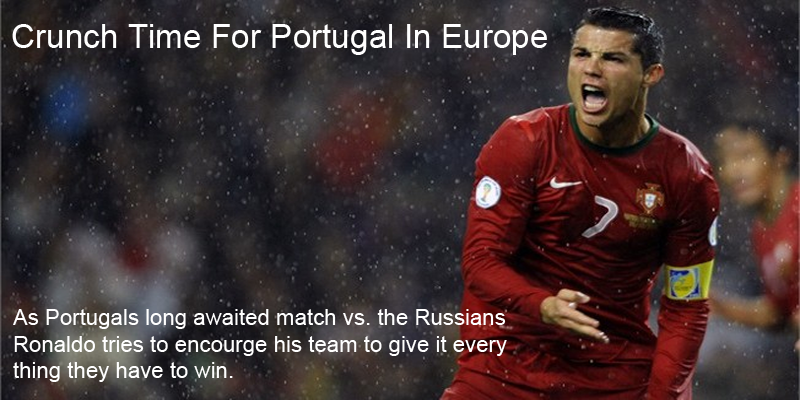
<style>
.page{position:relative;width:800px;height:400px}
.page>*{position:absolute;margin:0}
.t1{font:33.3px "ArialMT";color:#ffffff}
.t2{font:22.2px "ArialMT";color:#ffffff}
</style>
<div class="page">
<p class="t1" style="left:12px;top:24px;width:535px;height:31px">Crunch Time For Portugal In Europe</p>
<p class="t2" style="left:13px;top:309px;width:494px;height:73px">As Portugals long awaited match vs. the Russians<br>Ronaldo tries to encourge his team to give it every<br>thing they have to win.</p>
</div>
